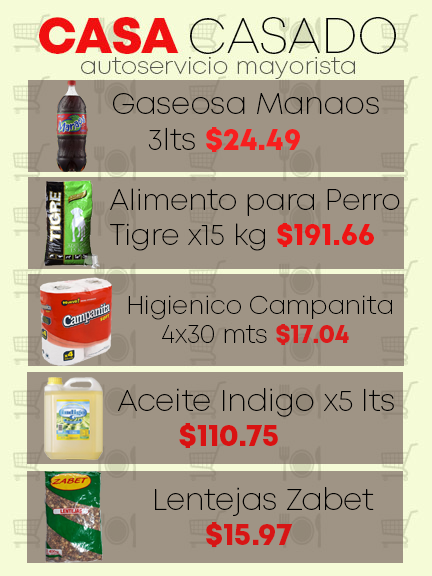
<style>
.page{position:relative;width:432px;height:576px;background:#9f9485}
.page>*{position:absolute;margin:0}
.t1{font:30px "Mont-ExtraLightDEMO";color:#000000}
.t2{font:30px "Mont-HeavyDEMO";color:#f71f1f}
.t3{font:29px "Mont-ExtraLightDEMO";color:#000000}
.t4{font:29px "Mont-HeavyDEMO";color:#ee1414}
.t5{font:25px "Mont-ExtraLightDEMO";color:#000000}
.t6{font:25px "Mont-HeavyDEMO";color:#db1b1b}
.t7{font:30px "Mont-HeavyDEMO";color:#d91212}
.t8{font:30px "Mont-HeavyDEMO";color:#d71515}
</style>
<div class="page">
<p class="t1" style="left:113px;top:93px;width:266px;height:59px">Gaseosa Manaos<br> 3lts <span class="t2">$24.49</span></p>
<p class="t3" style="left:110px;top:188px;width:290px;height:63px">Alimento para Perro<br>Tigre x15 kg <span class="t4">$191.66</span></p>
<p class="t5" style="left:128px;top:295px;width:264px;height:50px">Higienico Campanita<br>  4x30 mts <span class="t6">$17.04</span></p>
<p class="t1" style="left:118px;top:388px;width:276px;height:60px">Aceite Indigo x5 lts<br>    <span class="t7">$110.75</span></p>
<p class="t1" style="left:155px;top:487px;width:219px;height:60px">Lentejas Zabet <br>   <span class="t8">$15.97</span></p>
</div>
